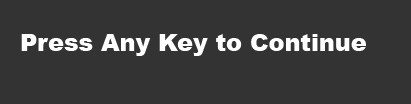
<style>
.page{position:relative;width:411px;height:104px;background:#333333}
.page>*{position:absolute;margin:0}
.t1{font:23.8px "Arial-Black";color:#ffffff}
</style>
<div class="page">
<p class="t1" style="left:21px;top:34px;width:345px;height:22px">Press Any Key to Continue</p>
</div>
